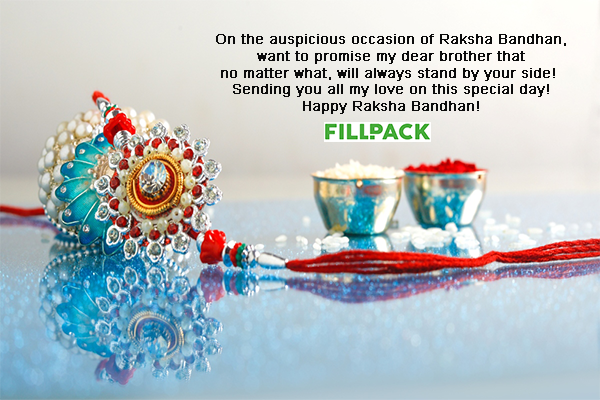
<style>
.page{position:relative;width:600px;height:400px}
.page>*{position:absolute;margin:0}
.t1{font:14px "ArialMT";color:#0c0c0c;font-weight:bold}
</style>
<div class="page">
<p class="t1" style="left:216px;top:34px;width:350px;height:80px;text-align:center">On the auspicious occasion of Raksha Bandhan,<br> want to promise my dear brother that <br>no matter what, will always stand by your side! <br>Sending you all my love on this special day!<br>Happy Raksha Bandhan!</p>
</div>
